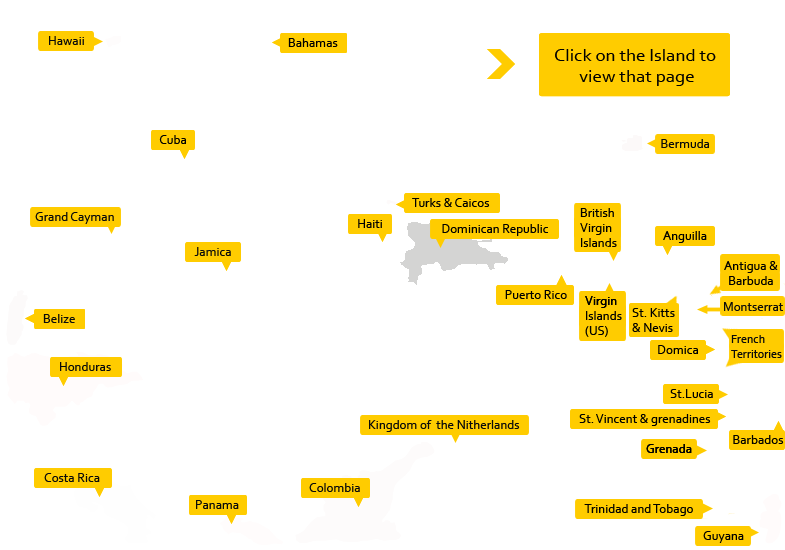
<style>
.page{position:relative;width:785px;height:550px;background:#ffffff}
.page>*{position:absolute;margin:0}
.t1{font:13px "Corbel";color:#0a0b0b}
.t2{font:13px "Corbel";color:#000000}
.t3{font:19px/18px "Corbel";color:#000000}
.t4{font:13px/12px "Corbel";color:#000000}
.t5{font:12px/12px "Corbel";color:#0a0b0b}
</style>
<div class="page">
<p class="t1" style="left:49px;top:36px;width:35px;height:9px">Hawaii</p>
<p class="t2" style="left:288px;top:38px;width:50px;height:9px">Bahamas</p>
<p class="t3" style="left:555px;top:49px;width:161px;height:37px;text-align:center">Click on the Island to <br>view that page</p>
<p class="t2" style="left:159px;top:135px;width:27px;height:9px">Cuba</p>
<p class="t1" style="left:661px;top:139px;width:48px;height:9px">Bermuda</p>
<p class="t2" style="left:412px;top:198px;width:78px;height:9px">Turks &amp; Caicos</p>
<p class="t4" style="left:580px;top:208px;width:37px;height:39px">British<br>Virgin <br>Islands</p>
<p class="t1" style="left:35px;top:212px;width:79px;height:12px">Grand Cayman</p>
<p class="t2" style="left:358px;top:219px;width:24px;height:9px">Haiti</p>
<p class="t2" style="left:442px;top:224px;width:106px;height:12px">Dominican Republic</p>
<p class="t2" style="left:663px;top:231px;width:44px;height:12px">Anguilla</p>
<p class="t1" style="left:194px;top:247px;width:37px;height:9px">Jamica</p>
<p class="t4" style="left:724px;top:261px;width:54px;height:24px;text-align:center">Antigua &amp;<br>Barbuda</p>
<p class="t2" style="left:505px;top:290px;width:62px;height:9px">Puerto Rico</p>
<p class="t4" style="left:585px;top:296px;width:37px;height:41px">Virgin <br>Islands<br>(US)</p>
<p class="t1" style="left:724px;top:302px;width:59px;height:9px">Montserrat</p>
<p class="t1" style="left:43px;top:314px;width:32px;height:9px">Belize</p>
<p class="t4" style="left:632px;top:308px;width:43px;height:24px">St. Kitts<br>&amp; Nevis</p>
<p class="t5" style="left:731px;top:335px;width:51px;height:23px">French <br>Territories</p>
<p class="t2" style="left:658px;top:345px;width:40px;height:9px">Domica</p>
<p class="t1" style="left:60px;top:362px;width:51px;height:9px">Honduras</p>
<p class="t2" style="left:670px;top:389px;width:43px;height:9px">St.Lucia</p>
<p class="t2" style="left:579px;top:414px;width:132px;height:12px">St. Vincent &amp; grenadines</p>
<p class="t1" style="left:369px;top:420px;width:151px;height:12px">Kingdom of  the Nitherlands</p>
<p class="t2" style="left:733px;top:435px;width:51px;height:9px">Barbados</p>
<p class="t2" style="left:646px;top:444px;width:46px;height:9px">Grenada</p>
<p class="t1" style="left:44px;top:473px;width:56px;height:9px">Costa Rica</p>
<p class="t1" style="left:309px;top:483px;width:51px;height:9px">Colombia</p>
<p class="t1" style="left:196px;top:500px;width:43px;height:9px">Panama</p>
<p class="t2" style="left:584px;top:504px;width:109px;height:12px">Trinidad and Tobago</p>
<p class="t2" style="left:703px;top:531px;width:41px;height:12px">Guyana</p>
</div>
